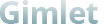
<style>
.page{position:relative;width:105px;height:24px;background:#ffffff}
.page>*{position:absolute;margin:0}
.t1{font:31.5px "DroidSans-Bold";letter-spacing:-0.015em;color:#a9c3c9}
</style>
<div class="page">
<p class="t1" style="left:0px;top:0px;width:98px;height:24px">Gimlet</p>
</div>
